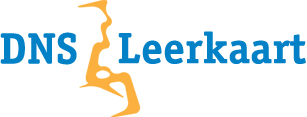
<style>
.page{position:relative;width:307px;height:117px;background:#ffffff}
.page>*{position:absolute;margin:0}
.t1{font:44px "OfficinaSerifStd-Bold";color:#0281c6}
</style>
<div class="page">
<p class="t1" style="left:0px;top:32px;width:77px;height:33px">DNS</p>
<p class="t1" style="left:118px;top:31px;width:188px;height:33px">Leerkaart</p>
</div>
